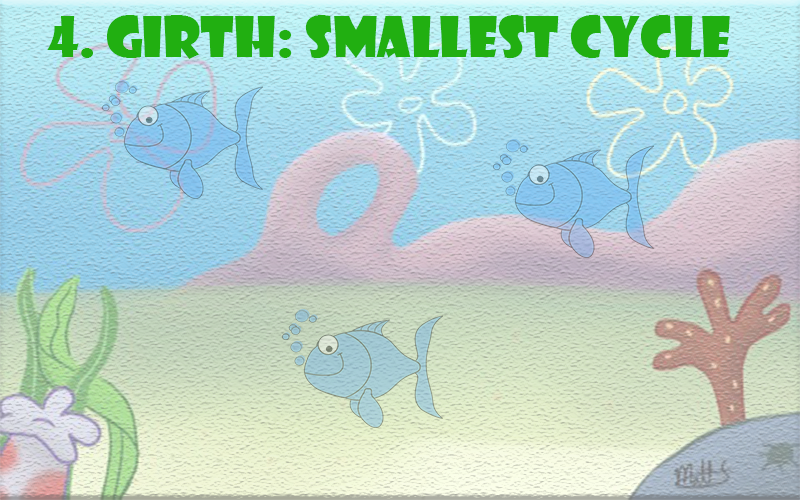
<style>
.page{position:relative;width:800px;height:500px}
.page>*{position:absolute;margin:0}
.t1{font:54.2px "ShowcardGothic-Reg";color:#21af11}
</style>
<div class="page">
<p class="t1" style="left:47px;top:15px;width:683px;height:44px">4. girth: Smallest Cycle</p>
</div>
